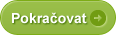
<style>
.page{position:relative;width:116px;height:35px}
.page>*{position:absolute;margin:0}
.t1{font:14px "Arial-BoldMT";color:#ffffff}
</style>
<div class="page">
<p class="t1" style="left:12px;top:12px;width:75px;height:12px">Pokračovat</p>
</div>
